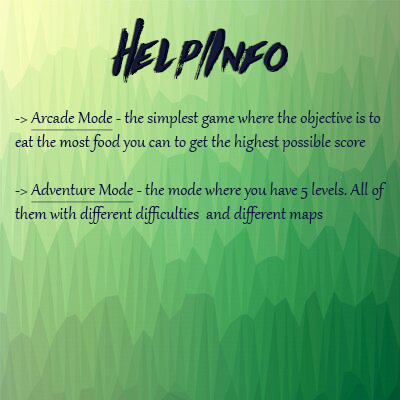
<style>
.page{position:relative;width:400px;height:400px}
.page>*{position:absolute;margin:0}
.t1{font:60px "Againts";color:#131936}
.t2{font:60px "Againts";color:#060b23}
.t3{font:20px "Gabriola";color:#0f1740}
.t4{font:20px "Gabriola";color:#0f1740;text-decoration:underline}
</style>
<div class="page">
<p class="t1" style="left:110px;top:18px;width:176px;height:65px">Help/Info</p>
<p class="t2" style="left:112px;top:18px;width:176px;height:65px">Help/Info</p>
<p class="t3" style="left:15px;top:110px;width:372px;height:114px">-&gt; <span class="t4">Arcade Mode</span> - the simplest game where the objective is to<br>eat the most food you can to get the highest possible score<br><br>-&gt; <span class="t4">Adventure Mode</span> - the mode where you have 5 levels. All of<br>them with different difficulties  and different maps</p>
</div>
